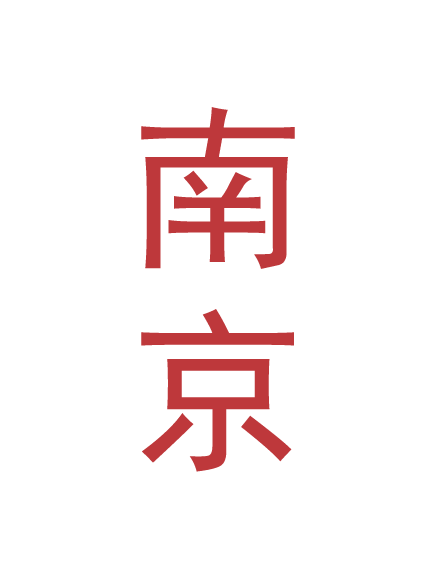
<style>
.page{position:relative;width:435px;height:579px;background:#ffffff}
.page>*{position:absolute;margin:0}
.t1{font:175.2px/201.9px "SimHei";letter-spacing:0.05em;color:#be383b}
</style>
<div class="page">
<p class="t1" style="left:141px;top:107px;width:154px;height:365px">南<br>京</p>
</div>
